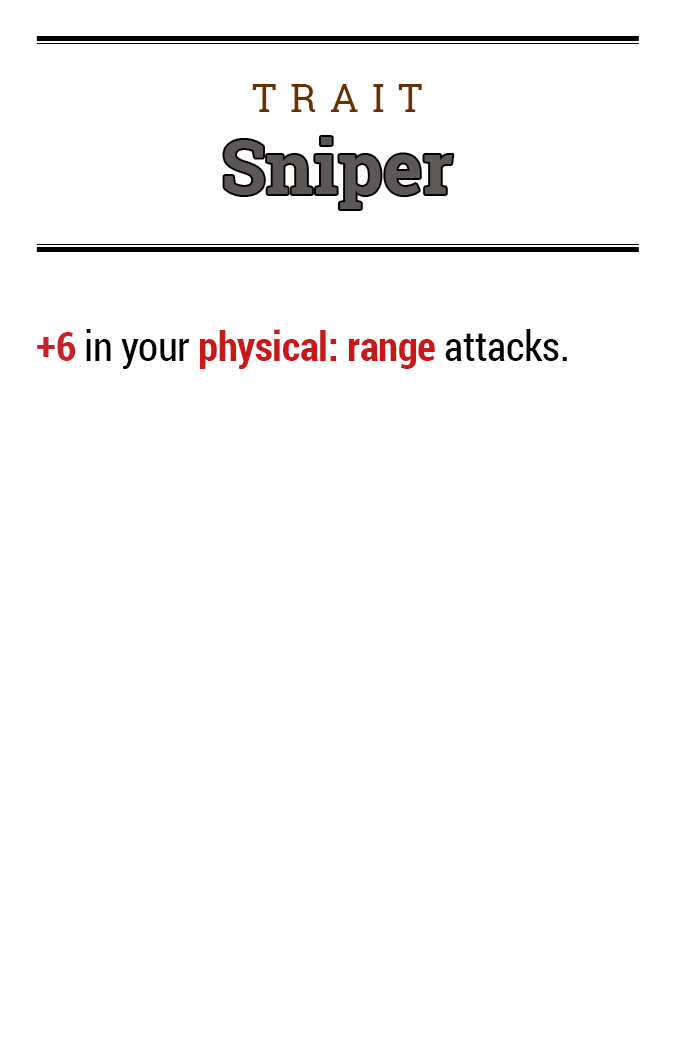
<style>
.page{position:relative;width:675px;height:1050px;background:#ffffff}
.page>*{position:absolute;margin:0}
.t1{font:39.2px "RobotoSlab-Regular";letter-spacing:0.34em;color:#663300}
.t2{font:74.5px "RobotoSlab-Bold";color:#5d5858}
.t3{font:41.1px "RobotoCondensed-Bold";letter-spacing:-0.01em;color:#c8191a}
.t4{font:41.1px "RobotoCondensed-Bold";letter-spacing:-0.01em;color:#c82127}
.t5{font:41.1px "RobotoCondensed-Regular";letter-spacing:-0.01em;color:#000000}
</style>
<div class="page">
<p class="t1" style="left:252px;top:84px;width:170px;height:28px">TRAIT</p>
<p class="t2" style="left:224px;top:137px;width:229px;height:72px">Sniper</p>
<p class="t3" style="left:37px;top:329px;width:530px;height:40px"><span class="t4">+6</span><span class="t5"> in your </span>physical: range<span class="t5"> attacks.</span></p>
</div>
